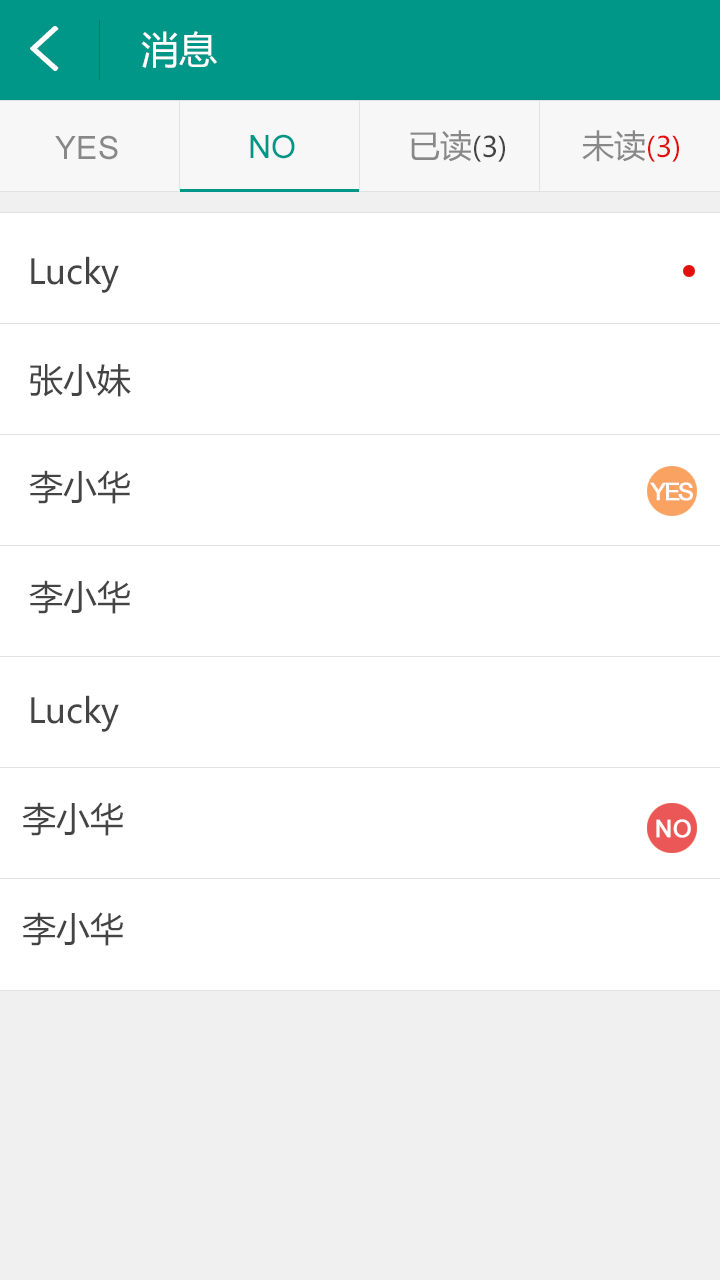
<style>
.page{position:relative;width:720px;height:1280px;background:#ffffff}
.page>*{position:absolute;margin:0}
.t1{font:62px "SimHei";color:#ffffff;font-weight:bold}
.t2{font:38px "MicrosoftYaHei";color:#ffffff}
.t3{font:32px "ArialMT";color:#888888}
.t4{font:32px "ArialMT";color:#009788}
.t5{font:28px "MicrosoftYaHei";color:#444444}
.t6{font:32px "MicrosoftYaHei";color:#888888}
.t7{font:28px "MicrosoftYaHei";color:#e20f0f}
.t8{font:34px "MicrosoftYaHei";color:#444444}
.t9{font:24px "ArialMT";letter-spacing:-0.12em;color:#ffffff;font-weight:bold}
.t10{font:24px "ArialMT";color:#ffffff;font-weight:bold}
</style>
<div class="page">
<p class="t1" style="left:30px;top:26px;width:29px;height:45px">&lt;</p>
<p class="t2" style="left:141px;top:31px;width:76px;height:37px">消息</p>
<p class="t3" style="left:55px;top:135px;width:63px;height:25px">YES</p>
<p class="t4" style="left:250px;top:134px;width:45px;height:25px">NO</p>
<p class="t5" style="left:410px;top:130px;width:95px;height:32px"><span class="t6">已读</span>(3)</p>
<p class="t7" style="left:582px;top:130px;width:97px;height:32px"><span class="t6">未读</span>(3)</p>
<p class="t8" style="left:31px;top:256px;width:88px;height:37px">Lucky</p>
<p class="t8" style="left:30px;top:364px;width:101px;height:33px">张小妹</p>
<p class="t8" style="left:29px;top:470px;width:101px;height:34px">李小华</p>
<p class="t9" style="left:650px;top:482px;width:43px;height:19px">YES</p>
<p class="t8" style="left:29px;top:580px;width:101px;height:34px">李小华</p>
<p class="t8" style="left:31px;top:695px;width:88px;height:37px">Lucky</p>
<p class="t8" style="left:22px;top:802px;width:101px;height:34px">李小华</p>
<p class="t10" style="left:656px;top:819px;width:35px;height:19px">NO</p>
<p class="t8" style="left:22px;top:912px;width:101px;height:34px">李小华</p>
</div>
